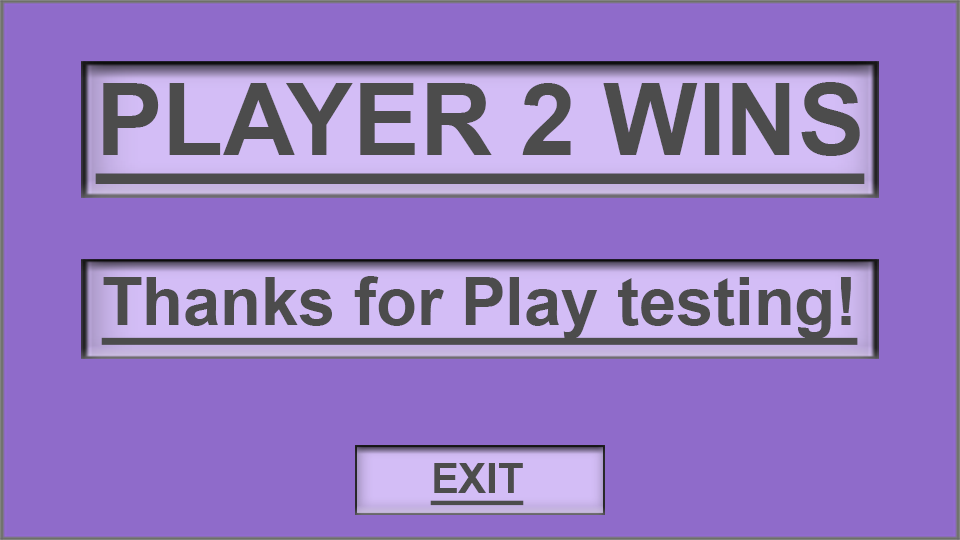
<style>
.page{position:relative;width:960px;height:540px;background:#8f6bca}
.page>*{position:absolute;margin:0}
.t1{font:100px "Arial-BoldMT";color:#4c4c4c;text-decoration:underline}
.t2{font:66.7px "Arial-BoldMT";color:#4c4c4c;text-decoration:underline}
.t3{font:41.7px "Arial-BoldMT";color:#4c4c4c;text-decoration:underline}
</style>
<div class="page">
<p class="t1" style="left:95px;top:82px;width:770px;height:102px">PLAYER 2 WINS</p>
<p class="t2" style="left:101px;top:276px;width:757px;height:69px">Thanks for Play testing!</p>
<p class="t3" style="left:430px;top:463px;width:94px;height:43px">EXIT</p>
</div>
